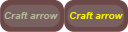
<style>
.page{position:relative;width:128px;height:32px;background:#796161}
.page>*{position:absolute;margin:0}
.t1{font:10px "Arial-BoldItalicMT";color:#b6b698}
.t2{font:10px "Arial-BoldItalicMT";color:#f6f302}
</style>
<div class="page">
<p class="t1" style="left:4px;top:12px;width:54px;height:7px">Craft arrow</p>
<p class="t2" style="left:69px;top:12px;width:54px;height:7px">Craft arrow</p>
</div>
